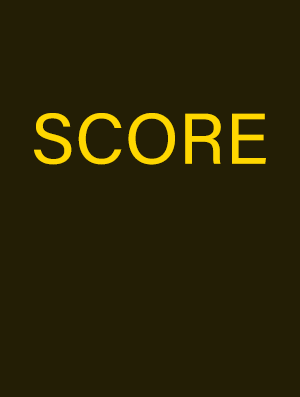
<style>
.page{position:relative;width:300px;height:397px;background:#231e05}
.page>*{position:absolute;margin:0}
.t1{font:72px "AcuminConcept-Regular";color:#ffd700}
</style>
<div class="page">
<p class="t1" style="left:34px;top:113px;width:232px;height:52px">SCORE</p>
</div>
